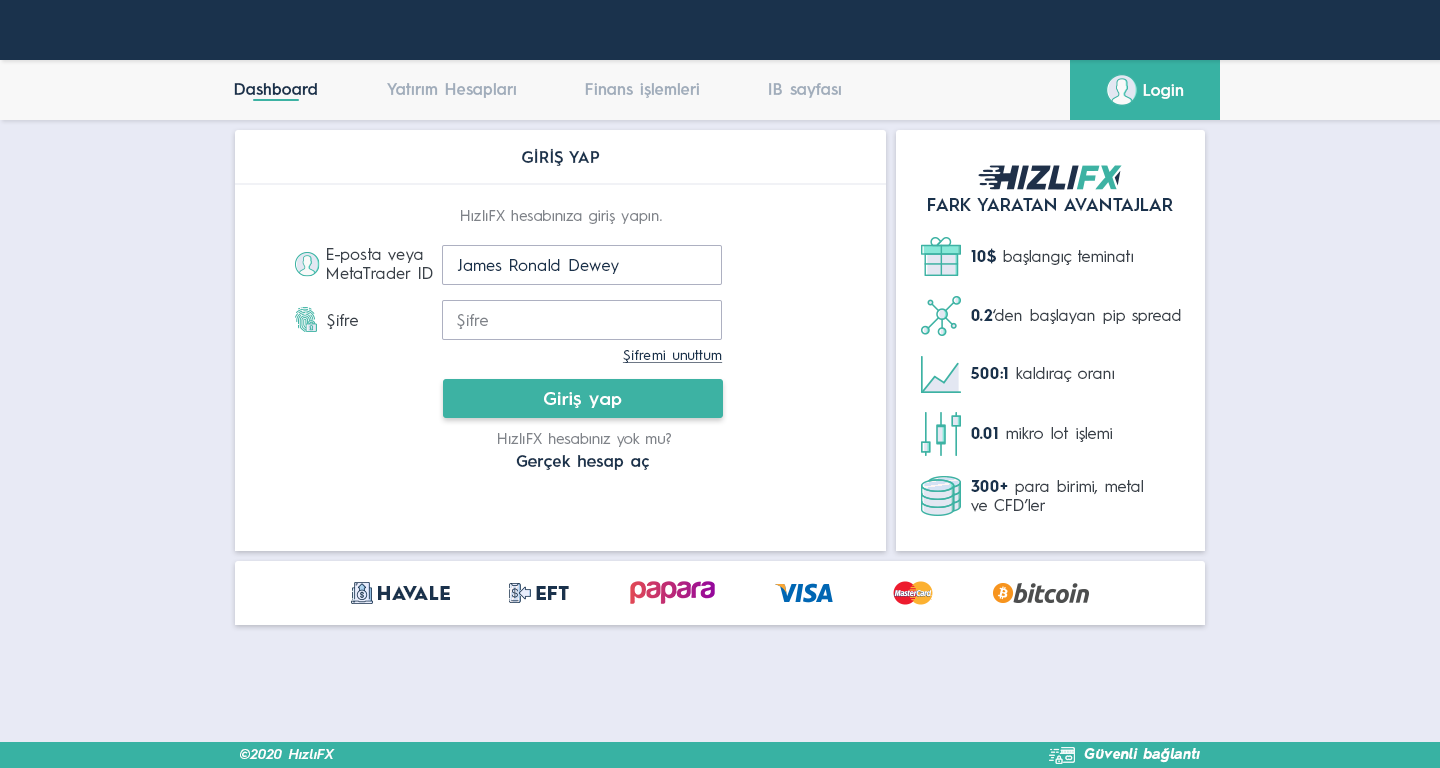
<style>
.page{position:relative;width:1440px;height:768px;background:#ffffff}
.page>*{position:absolute;margin:0}
.t1{font:16px "HurmeGeometricSans3-SemiBold";color:#1a324c}
.t2{font:16px "HurmeGeometricSans3-SemiBold";color:#a1adbb}
.t3{font:16px "HurmeGeometricSans3-SemiBold";color:#fefefe}
.t4{font:16px "HurmeGeometricSans1-SemiBold";letter-spacing:0.01em;color:#1a324c}
.t5{font:18px "HurmeGeometricSans1-SemiBold";color:#1a324c}
.t6{font:15px "HurmeGeometricSans1-Regular";letter-spacing:0.01em;color:#7f8389}
.t7{font:16px "HurmeGeometricSans1-Regular";letter-spacing:0.01em;color:#3a4149}
.t8{font:16px "HurmeGeometricSans1-Regular";color:#3a4149}
.t9{font:16px "HurmeGeometricSans1-Bold";color:#1a324c}
.t10{font:16px "HurmeGeometricSans1-Regular";letter-spacing:0.01em;color:#1a324c}
.t11{font:16px "HurmeGeometricSans1-Regular";letter-spacing:0.01em;color:#7f8389}
.t12{font:14px "HurmeGeometricSans1-Regular";letter-spacing:0.025em;color:#1a324c;text-decoration:underline}
.t13{font:18px "HurmeGeometricSans1-SemiBold";letter-spacing:0.025em;color:#ffffff}
.t14{font:16px "HurmeGeometricSans3-SemiBold";letter-spacing:0.025em;color:#1a324c}
.t15{font:18px "HurmeGeometricSans1-Black";letter-spacing:0.025em;color:#1a324c}
.t16{font:14px "HurmeGeometricSans2-SemiBoldObl";letter-spacing:0.025em;color:#ffffff}
.t17{font:14px "HurmeGeometricSans2-BoldObl";letter-spacing:0.025em;color:#ffffff}
</style>
<div class="page">
<p class="t1" style="left:234px;top:83px;width:83px;height:12px">Dashboard</p>
<p class="t2" style="left:387px;top:83px;width:129px;height:15px">Yatırım Hesapları</p>
<p class="t2" style="left:585px;top:83px;width:114px;height:15px">Finans işlemleri</p>
<p class="t2" style="left:769px;top:83px;width:72px;height:15px">IB sayfası</p>
<p class="t3" style="left:1143px;top:84px;width:41px;height:15px">Login</p>
<p class="t4" style="left:522px;top:148px;width:78px;height:18px">GİRİŞ YAP</p>
<p class="t5" style="left:928px;top:198px;width:245px;height:13px">FARK YARATAN AVANTAJLAR</p>
<p class="t6" style="left:461px;top:210px;width:201px;height:14px">HızlıFX hesabınıza giriş yapın.</p>
<p class="t7" style="left:327px;top:248px;width:106px;height:31px">E-posta veya<br>MetaTrader ID</p>
<p class="t8" style="left:971px;top:248px;width:162px;height:17px"><span class="t9">10$</span> başlangıç teminatı</p>
<p class="t10" style="left:457px;top:259px;width:162px;height:15px">James Ronald Dewey</p>
<p class="t7" style="left:327px;top:314px;width:31px;height:15px">Şifre</p>
<p class="t11" style="left:457px;top:314px;width:31px;height:15px">Şifre</p>
<p class="t8" style="left:971px;top:309px;width:210px;height:15px"><span class="t9">0.2</span>‘den başlayan pip spread</p>
<p class="t12" style="left:622px;top:350px;width:101px;height:13px">Şifremi unuttum</p>
<p class="t8" style="left:970px;top:367px;width:144px;height:15px"><span class="t9">500:1</span> kaldıraç oranı</p>
<p class="t13" style="left:544px;top:392px;width:78px;height:16px">Giriş yap</p>
<p class="t6" style="left:498px;top:433px;width:173px;height:14px">HızlıFX hesabınız yok mu?</p>
<p class="t8" style="left:971px;top:427px;width:141px;height:15px"><span class="t9">0.01</span> mikro lot işlemi</p>
<p class="t14" style="left:516px;top:455px;width:133px;height:15px">Gerçek hesap aç</p>
<p class="t8" style="left:971px;top:480px;width:172px;height:32px"><span class="t9">300+</span> para birimi, metal<br>ve CFD’ler</p>
<p class="t15" style="left:378px;top:586px;width:72px;height:14px">HAVALE</p>
<p class="t15" style="left:536px;top:586px;width:33px;height:14px">EFT</p>
<p class="t16" style="left:240px;top:749px;width:95px;height:10px">©2020 HızlıFX</p>
<p class="t17" style="left:1084px;top:748px;width:116px;height:15px">Güvenli bağlantı</p>
</div>
